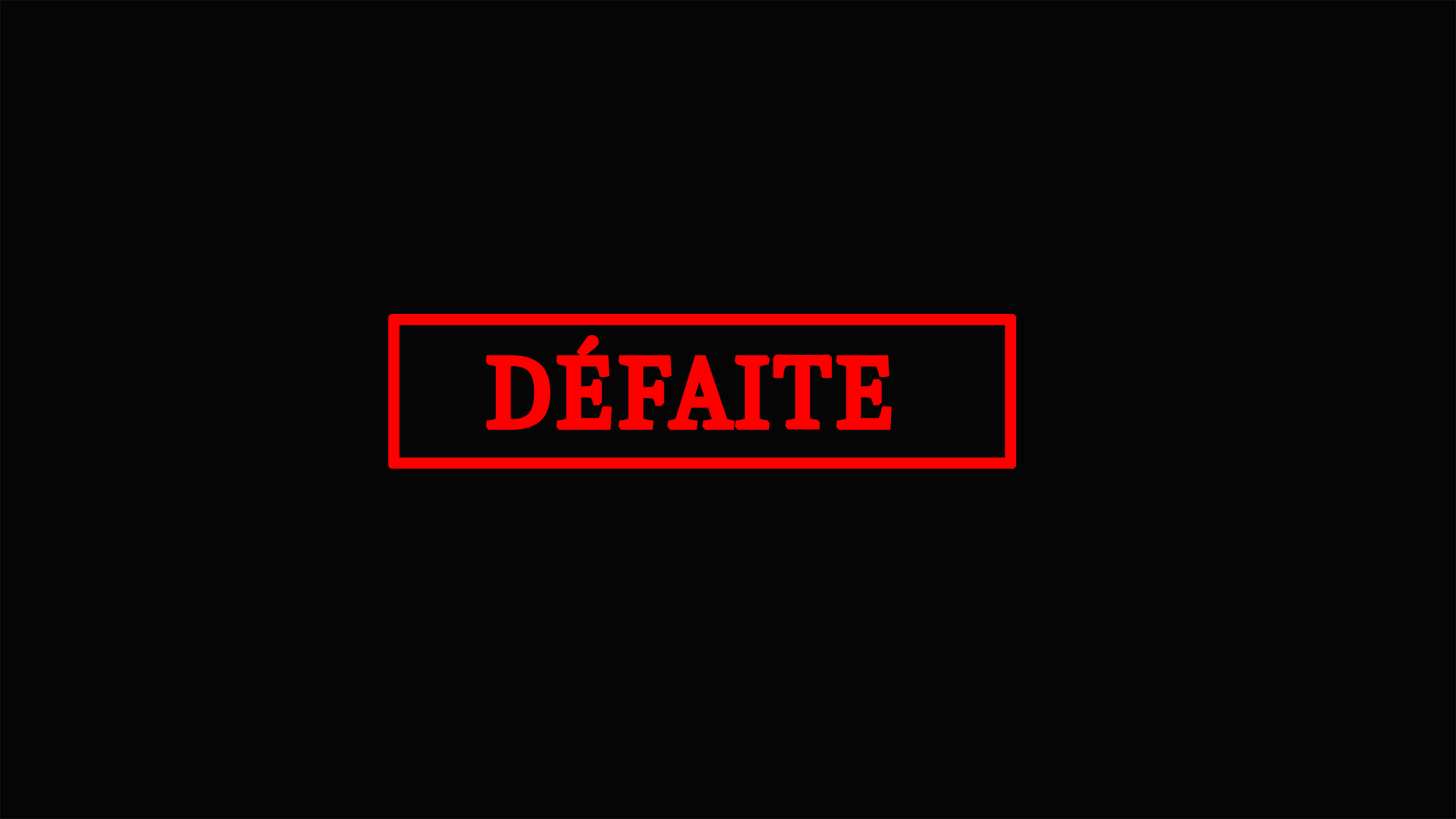
<style>
.page{position:relative;width:1456px;height:819px;background:#060505}
.page>*{position:absolute;margin:0}
.t1{font:103.1px "Caladea-Regular";color:#ff0000;font-weight:bold}
</style>
<div class="page">
<p class="t1" style="left:485px;top:334px;width:407px;height:96px">DÉFAITE</p>
</div>
